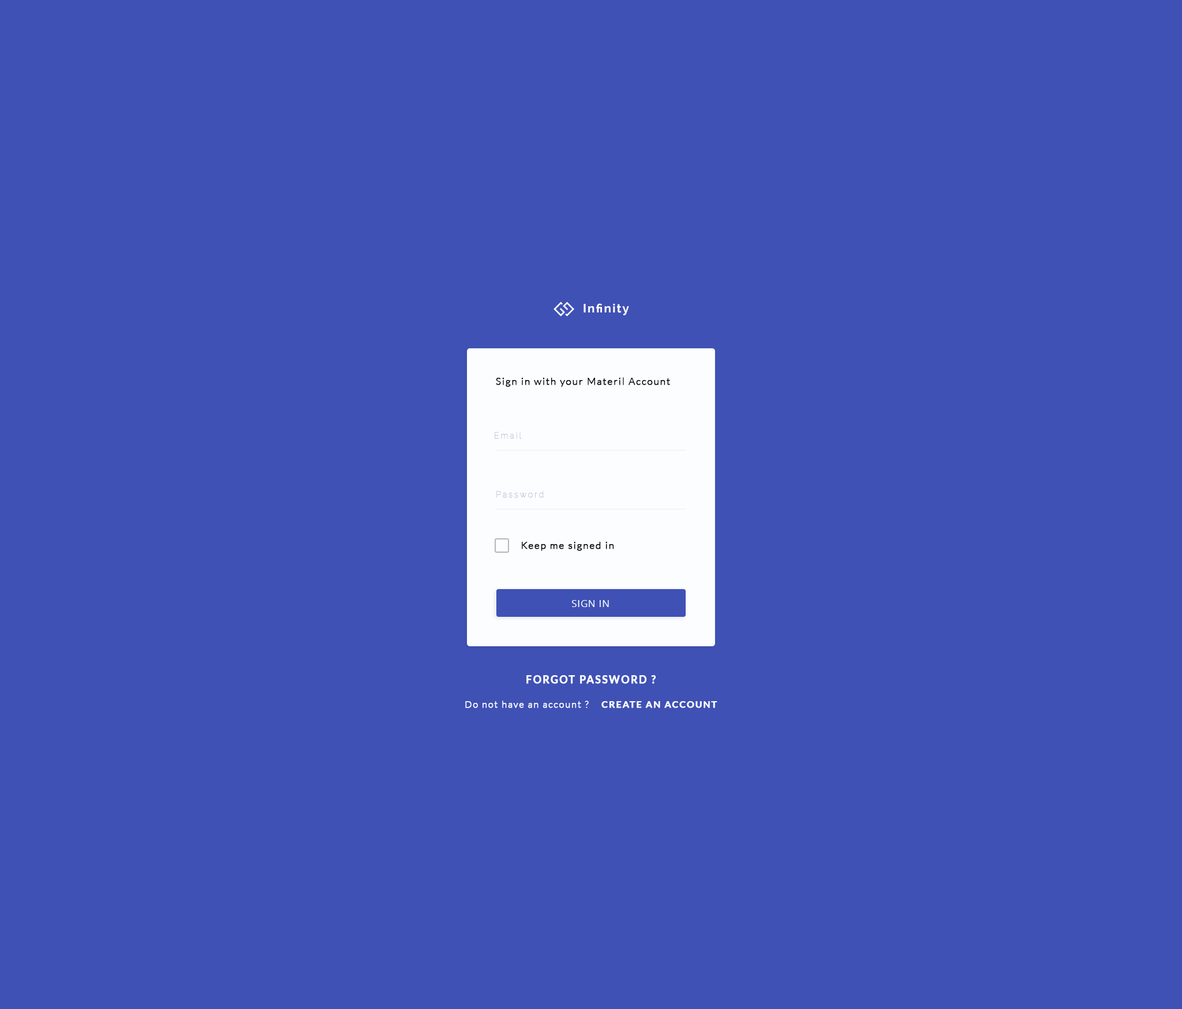
<style>
.page{position:relative;width:1182px;height:1009px;background:#3f51b5}
.page>*{position:absolute;margin:0}
.t1{font:12px "Raleway-Bold";letter-spacing:0.1em;color:#ffffff}
.t2{font:9.6px "Lato-Light";letter-spacing:0.1em;color:#000000;font-weight:bold}
.t3{font:8.1px "Raleway-Thin";letter-spacing:0.2em;color:#c9ccdd;font-weight:bold}
.t4{font:9.6px "OpenSans";letter-spacing:0.05em;color:#fbfdff}
.t5{font:10.4px "Lato-Bold";letter-spacing:0.1em;color:#fbfdff;font-weight:bold}
.t6{font:9.2px "Lato-Light";letter-spacing:0.1em;color:#fbfdff;font-weight:bold}
.t7{font:9.2px "Lato-Bold";letter-spacing:0.1em;color:#fbfdff;font-weight:bold}
</style>
<div class="page">
<p class="t1" style="left:584px;top:303px;width:45px;height:12px">Infinity</p>
<p class="t2" style="left:496px;top:377px;width:174px;height:10px">Sign in with your Materil Account</p>
<p class="t3" style="left:495px;top:432px;width:27px;height:7px">Email</p>
<p class="t3" style="left:496px;top:491px;width:48px;height:7px">Password</p>
<p class="t2" style="left:522px;top:542px;width:92px;height:9px">Keep me signed in</p>
<p class="t4" style="left:572px;top:600px;width:37px;height:7px">SIGN IN</p>
<p class="t5" style="left:527px;top:675px;width:129px;height:9px">FORGOT PASSWORD ?</p>
<p class="t6" style="left:465px;top:700px;width:253px;height:8px">Do not have an account ? <span class="t7">   CREATE AN ACCOUNT</span></p>
</div>
